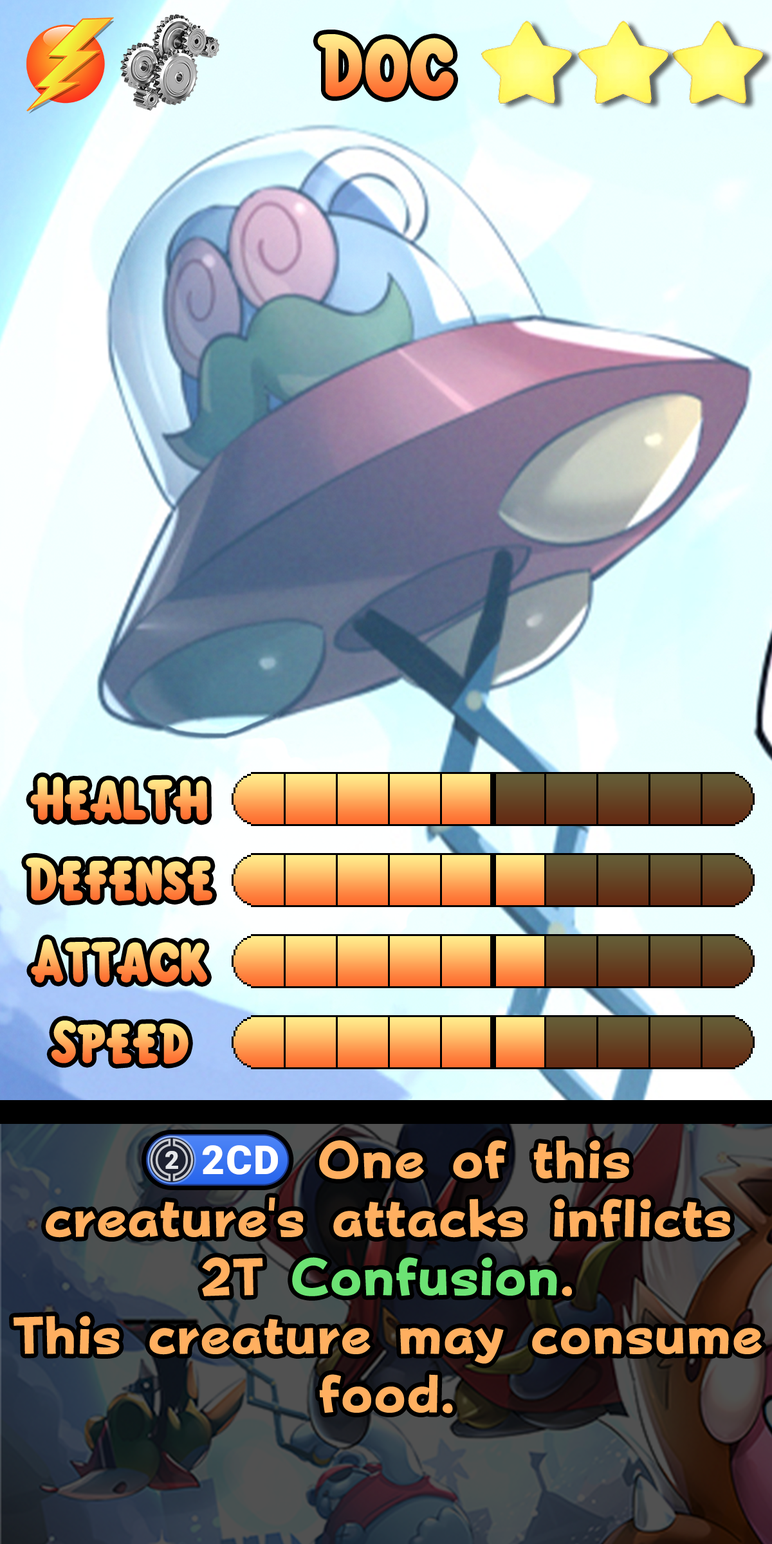
<style>
.page{position:relative;width:772px;height:1544px}
.page>*{position:absolute;margin:0}
.t1{font:135.1px "KirbyClassic"}
.t2{font:92.7px "KirbyClassic"}
.t3{font:90.1px/58.6px "FOTPopHappinessStrp-ExtraBold";color:#ffaf60}
.t4{font:90.1px/58.6px "stoogedings-Regular";color:#ffaf60}
.t5{font:90.1px/58.6px "FOTPopHappinessStrp-ExtraBold";color:#6ce374}
</style>
<div class="page">
<p class="t1" style="left:317px;top:34px;width:137px;height:64px">Doc</p>
<p class="t2" style="left:30px;top:777px;width:178px;height:44px">Health</p>
<p class="t2" style="left:26px;top:858px;width:186px;height:44px">Defense</p>
<p class="t2" style="left:31px;top:939px;width:176px;height:44px">Attack</p>
<p class="t2" style="left:51px;top:1021px;width:138px;height:43px">Speed</p>
<p class="t3" style="left:14px;top:1134px;width:748px;height:280px;text-align:center"><span class="t4">(2CD)</span> One of this creature's attacks inflicts 2T <span class="t5">Confusion</span>.<br>This creature may consume food.</p>
</div>
